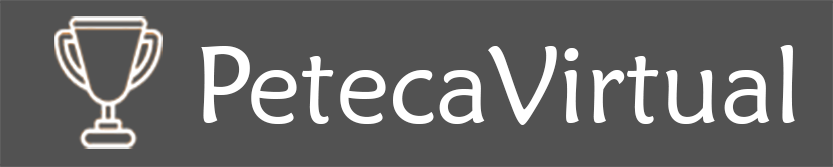
<style>
.page{position:relative;width:833px;height:167px;background:#525252}
.page>*{position:absolute;margin:0}
.t1{font:108.5px "MaiandraGD-Regular";color:#ffffff}
</style>
<div class="page">
<p class="t1" style="left:201px;top:45px;width:594px;height:80px">PetecaVirtual</p>
</div>
